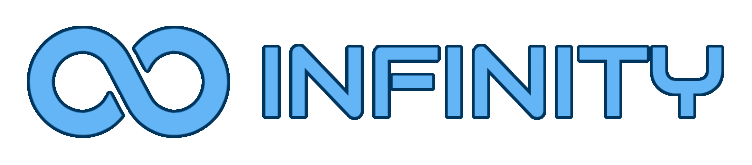
<style>
.page{position:relative;width:752px;height:165px;background:#ffffff}
.page>*{position:absolute;margin:0}
.t1{font:98px "Audiowide-Regular";color:#64b5f6}
</style>
<div class="page">
<p class="t1" style="left:265px;top:46px;width:457px;height:71px">INFINITY</p>
</div>
